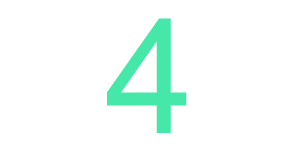
<style>
.page{position:relative;width:300px;height:150px;background:#ffffff}
.page>*{position:absolute;margin:0}
.t1{font:160px "ArialMT";color:#46e8a9}
</style>
<div class="page">
<p class="t1" style="left:107px;top:18px;width:80px;height:115px">4</p>
</div>
